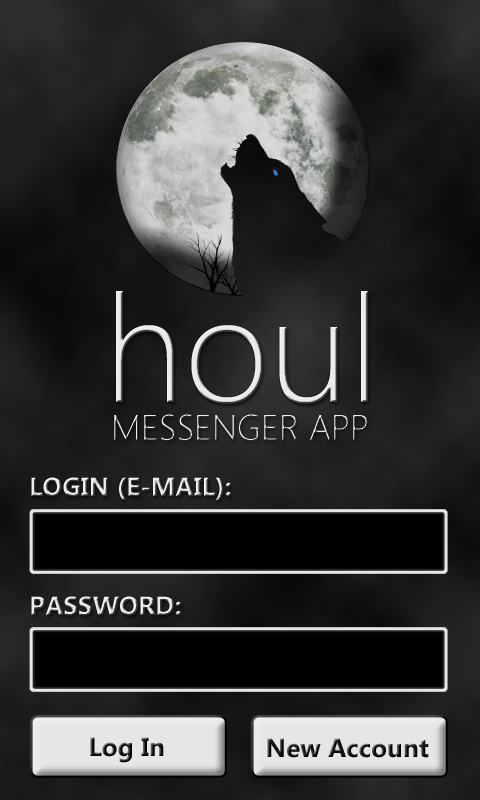
<style>
.page{position:relative;width:480px;height:800px}
.page>*{position:absolute;margin:0}
.t1{font:150px "SegoeUI-Light";color:#eaeaea}
.t2{font:35.6px "SegoeUI-Light"}
.t3{font:26px "SegoeUI-Bold"}
.t4{font:26px "SegoeUI-Bold";color:#131313}
</style>
<div class="page">
<p class="t1" style="left:116px;top:291px;width:252px;height:113px">houl</p>
<p class="t2" style="left:114px;top:414px;width:254px;height:27px">MESSENGER APP</p>
<p class="t3" style="left:31px;top:477px;width:200px;height:23px">LOGIN (E-MAIL):</p>
<p class="t3" style="left:31px;top:596px;width:150px;height:20px">PASSWORD:</p>
<p class="t4" style="left:90px;top:737px;width:74px;height:26px">Log In</p>
<p class="t4" style="left:267px;top:738px;width:162px;height:20px">New Account</p>
</div>
